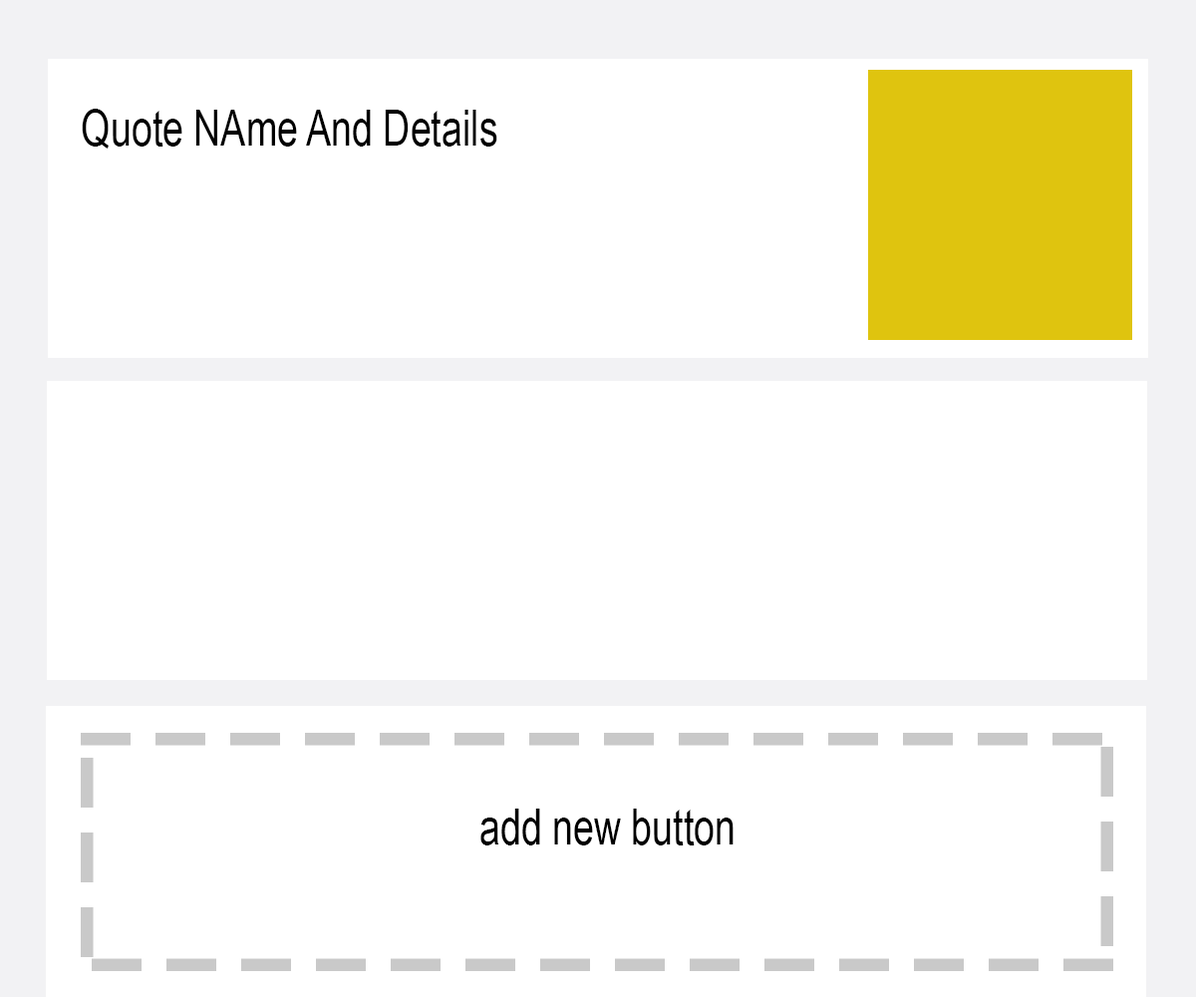
<style>
.page{position:relative;width:1196px;height:997px;background:#ffffff}
.page>*{position:absolute;margin:0}
.t1{font:50.3px "ArialNarrow";color:#000000;scale:0.91 1}
</style>
<div class="page">
<p class="t1" style="left:82px;top:109px;width:415px;height:40px">Quote NAme And Details</p>
<p class="t1" style="left:480px;top:808px;width:254px;height:37px">add new button</p>
</div>
